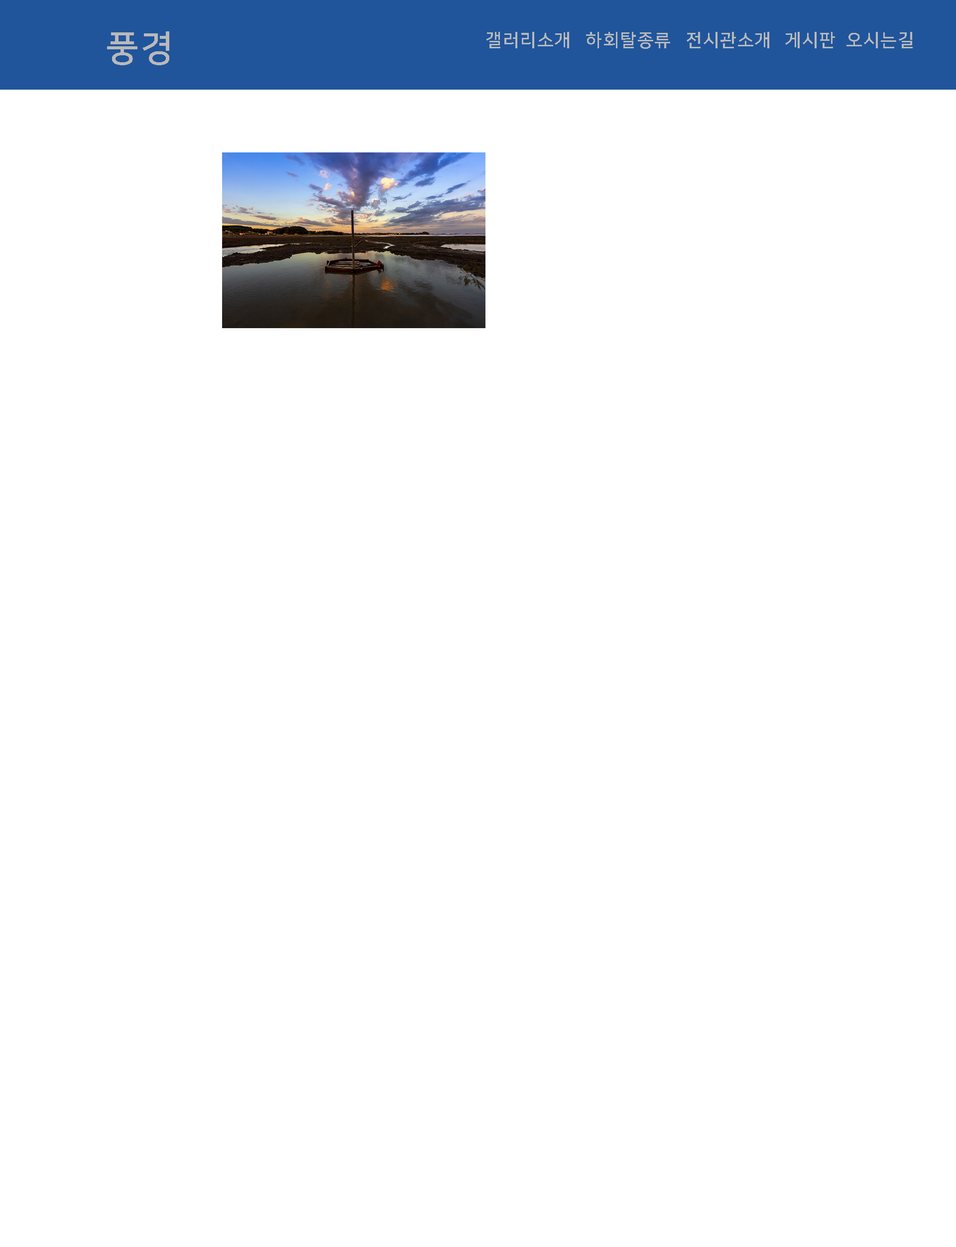
<style>
.page{position:relative;width:956px;height:1247px;background:#ffffff}
.page>*{position:absolute;margin:0}
.t1{font:35.9px "NanumSquareOTFB";letter-spacing:0.05em;color:#b9b9b9}
.t2{font:17.9px "NanumSquareOTFB";letter-spacing:0.05em;color:#b9b9b9}
</style>
<div class="page">
<p class="t1" style="left:107px;top:31px;width:62px;height:34px">풍경</p>
<p class="t2" style="left:487px;top:32px;width:82px;height:16px">갤러리소개</p>
<p class="t2" style="left:586px;top:32px;width:84px;height:17px">하회탈종류</p>
<p class="t2" style="left:687px;top:32px;width:82px;height:16px">전시관소개</p>
<p class="t2" style="left:785px;top:32px;width:50px;height:16px">게시판</p>
<p class="t2" style="left:847px;top:32px;width:66px;height:16px">오시는길</p>
</div>
